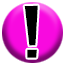
<style>
.page{position:relative;width:64px;height:64px;background:#ffffff}
.page>*{position:absolute;margin:0}
.t1{font:60px "Baveuse";color:#000000}
</style>
<div class="page">
<p class="t1" style="left:24px;top:5px;width:14px;height:53px">!</p>
</div>
